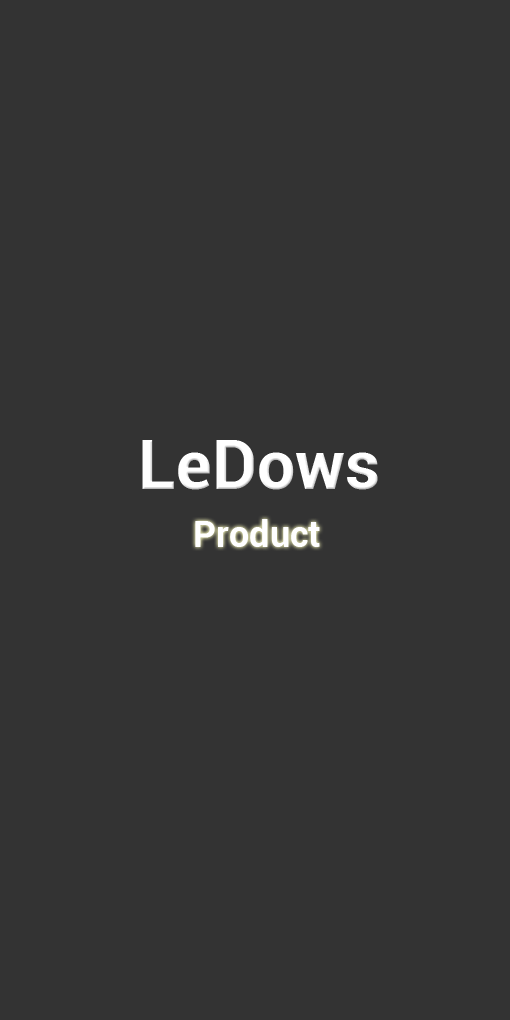
<style>
.page{position:relative;width:510px;height:1020px;background:#333333}
.page>*{position:absolute;margin:0}
.t1{font:68px "Roboto-Bold";color:#ffffff}
.t2{font:36px "Roboto-Bold";color:#ffffff}
</style>
<div class="page">
<p class="t1" style="left:142px;top:440px;width:236px;height:50px">LeDows</p>
<p class="t2" style="left:195px;top:519px;width:125px;height:28px">Product</p>
</div>
